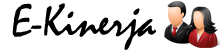
<style>
.page{position:relative;width:220px;height:50px;background:#ffffff}
.page>*{position:absolute;margin:0}
.t1{font:46.4px "Mistral";color:#000000}
</style>
<div class="page">
<p class="t1" style="left:12px;top:3px;width:144px;height:47px">E-Kinerja</p>
</div>
